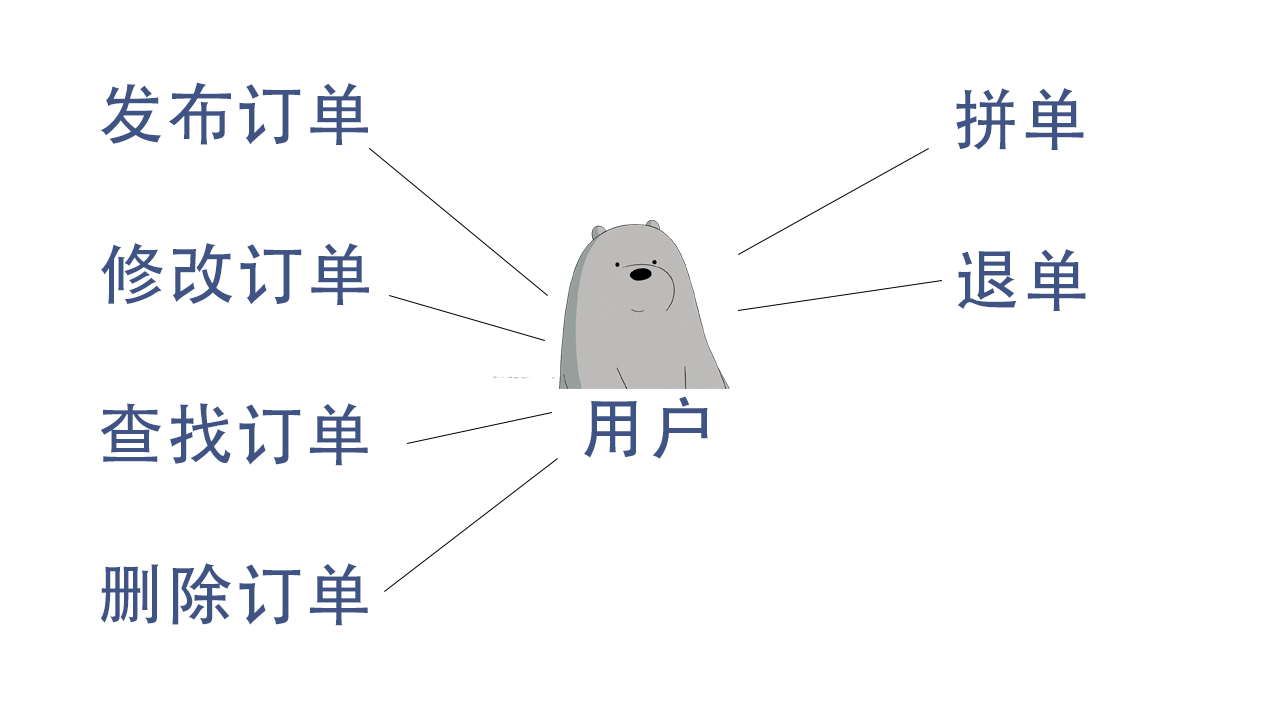
<style>
.page{position:relative;width:1280px;height:720px;background:#ffffff}
.page>*{position:absolute;margin:0}
.t1{font:66.7px "AdobeHeitiStd-Regular";letter-spacing:0.04em;color:#405385}
</style>
<div class="page">
<p class="t1" style="left:100px;top:82px;width:268px;height:63px">发布订单</p>
<p class="t1" style="left:956px;top:88px;width:128px;height:62px">拼单</p>
<p class="t1" style="left:101px;top:243px;width:268px;height:62px">修改订单</p>
<p class="t1" style="left:957px;top:249px;width:129px;height:62px">退单</p>
<p class="t1" style="left:100px;top:403px;width:268px;height:63px">查找订单</p>
<p class="t1" style="left:100px;top:563px;width:268px;height:63px">删除订单</p>
</div>
